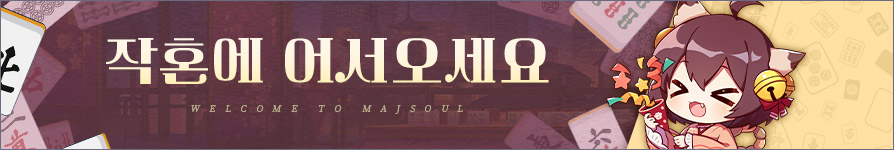
<style>
.page{position:relative;width:894px;height:150px}
.page>*{position:absolute;margin:0}
.t1{font:56.2px "Cafe24ClassicType-Regular";letter-spacing:0.04em;color:#fef6dd;scale:0.93 1}
</style>
<div class="page">
<p class="t1" style="left:106px;top:38px;width:443px;height:46px">작혼에 어서오세요</p>
</div>
